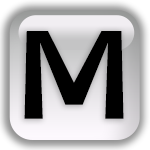
<style>
.page{position:relative;width:150px;height:150px}
.page>*{position:absolute;margin:0}
.t1{font:120px "OpenDyslexic-Regular";letter-spacing:0.005em;color:#000000;scale:1.2 1}
</style>
<div class="page">
<p class="t1" style="left:24px;top:31px;width:100px;height:88px">M</p>
</div>
